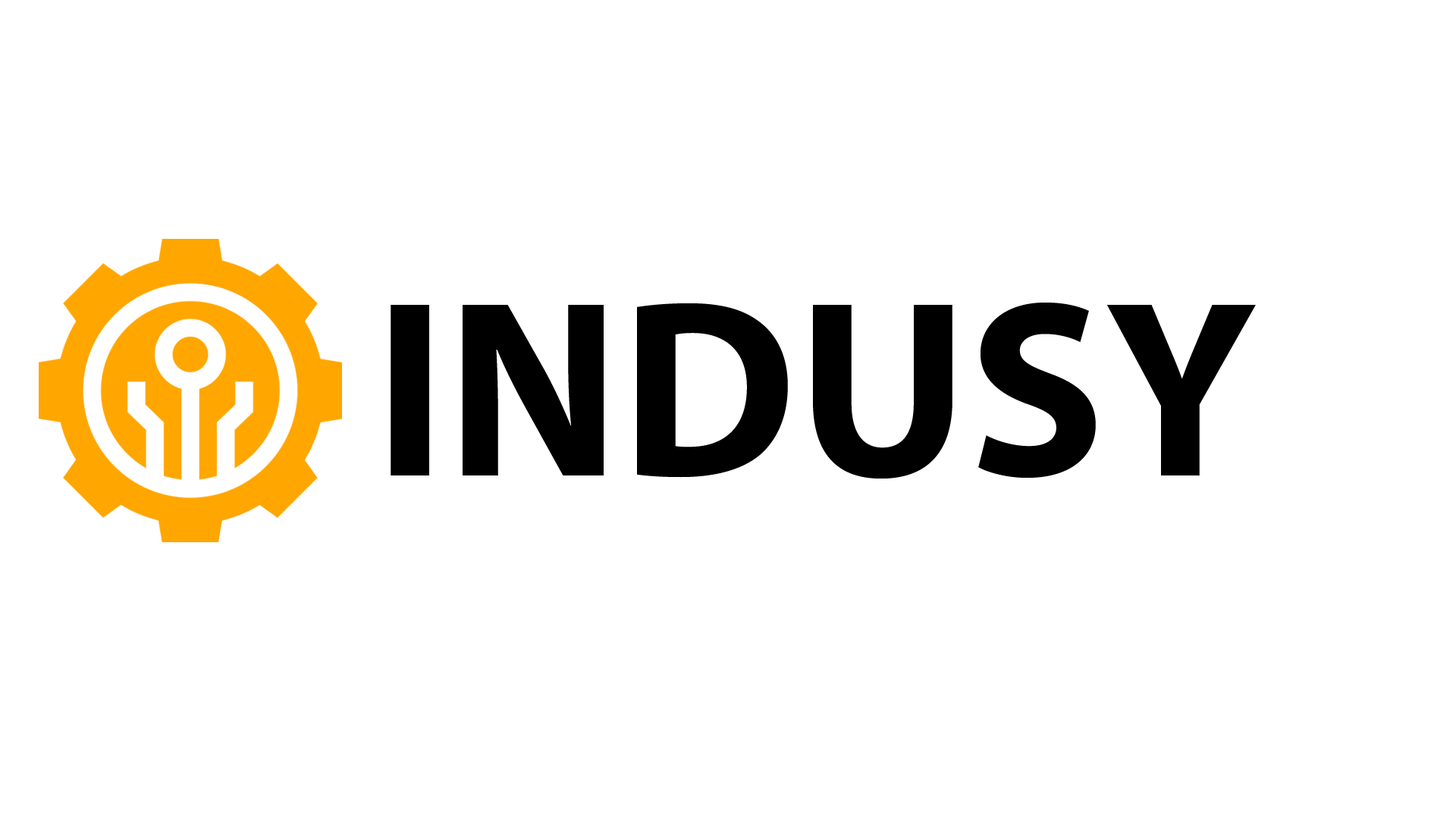
<style>
.page{position:relative;width:1456px;height:819px;background:#ffffff}
.page>*{position:absolute;margin:0}
.t1{font:252.8px "MyriadPro-Bold";color:#000000}
</style>
<div class="page">
<p class="t1" style="left:391px;top:303px;width:865px;height:176px">INDUSY</p>
</div>
